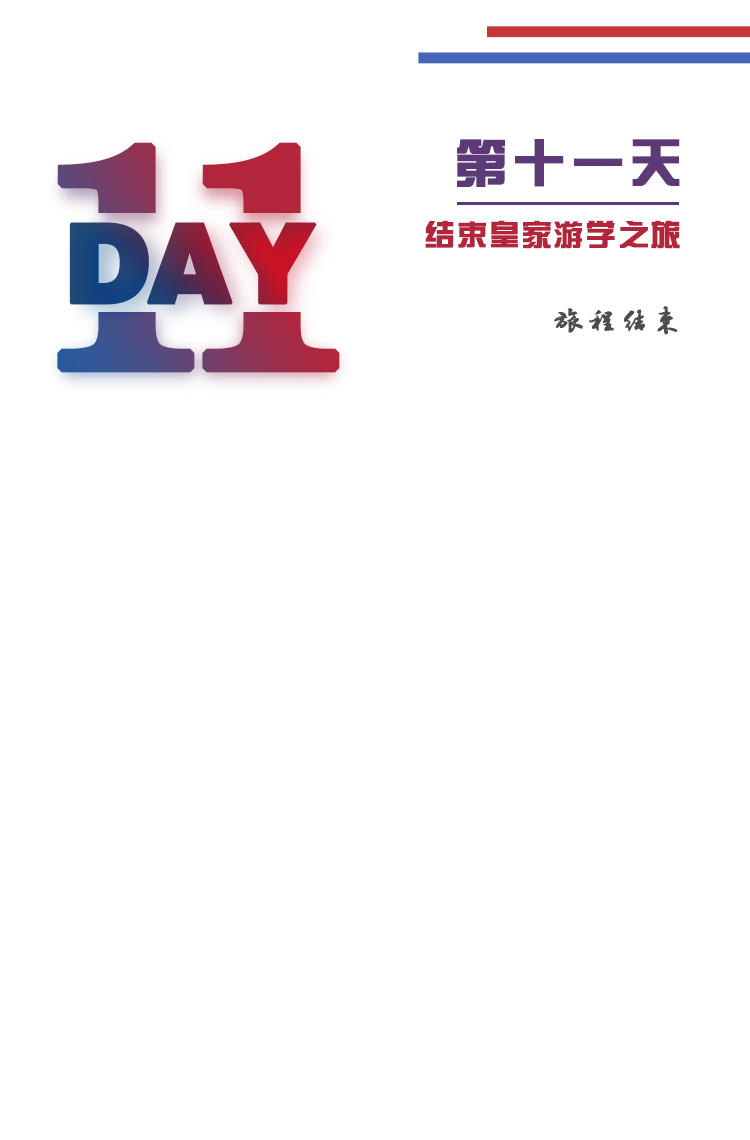
<style>
.page{position:relative;width:750px;height:1140px;background:#ffffff}
.page>*{position:absolute;margin:0}
.t1{font:320px "News706BT-BoldC";letter-spacing:-0.1em;font-weight:bold}
.t2{font:52px "FZZYJW--GB1-0";letter-spacing:0.1em;color:#5d3a77;font-weight:bold}
.t3{font:110px "FZCCHJW--GB1-0";letter-spacing:-0.05em;font-weight:bold}
.t4{font:30px "FZZYJW--GB1-0";letter-spacing:0.05em;color:#b3253a;font-weight:bold}
.t5{font:30px "·½ÕýÂÀ½¨µÂ×ÖÌå";letter-spacing:0.075em;color:#4d4d4d;font-weight:bold}
</style>
<div class="page">
<p class="t1" style="left:57px;top:142px;width:283px;height:231px">11</p>
<p class="t2" style="left:457px;top:139px;width:223px;height:48px">第十一天</p>
<p class="t3" style="left:69px;top:222px;width:248px;height:83px">DAY</p>
<p class="t4" style="left:425px;top:220px;width:255px;height:29px">结束皇家游学之旅</p>
<p class="t5" style="left:554px;top:306px;width:124px;height:29px">旅程结束</p>
</div>
